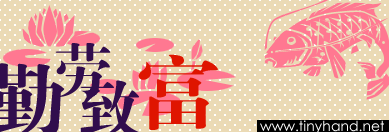
<style>
.page{position:relative;width:389px;height:132px;background:#ebdab5}
.page>*{position:absolute;margin:0}
.t1{font:60px "FZDBSJW--GB1-0";color:#310d4d}
.t2{font:81.9px "FZDBSJW--GB1-0";color:#df1500;scale:1.09 1}
.t3{font:14px "CenturyGothic";color:#ffffff}
</style>
<div class="page">
<p class="t1" style="left:55px;top:43px;width:56px;height:55px">劳</p>
<p class="t2" style="left:138px;top:54px;width:80px;height:76px">富</p>
<p class="t3" style="left:260px;top:120px;width:124px;height:14px">www.tinyhand.net</p>
</div>
